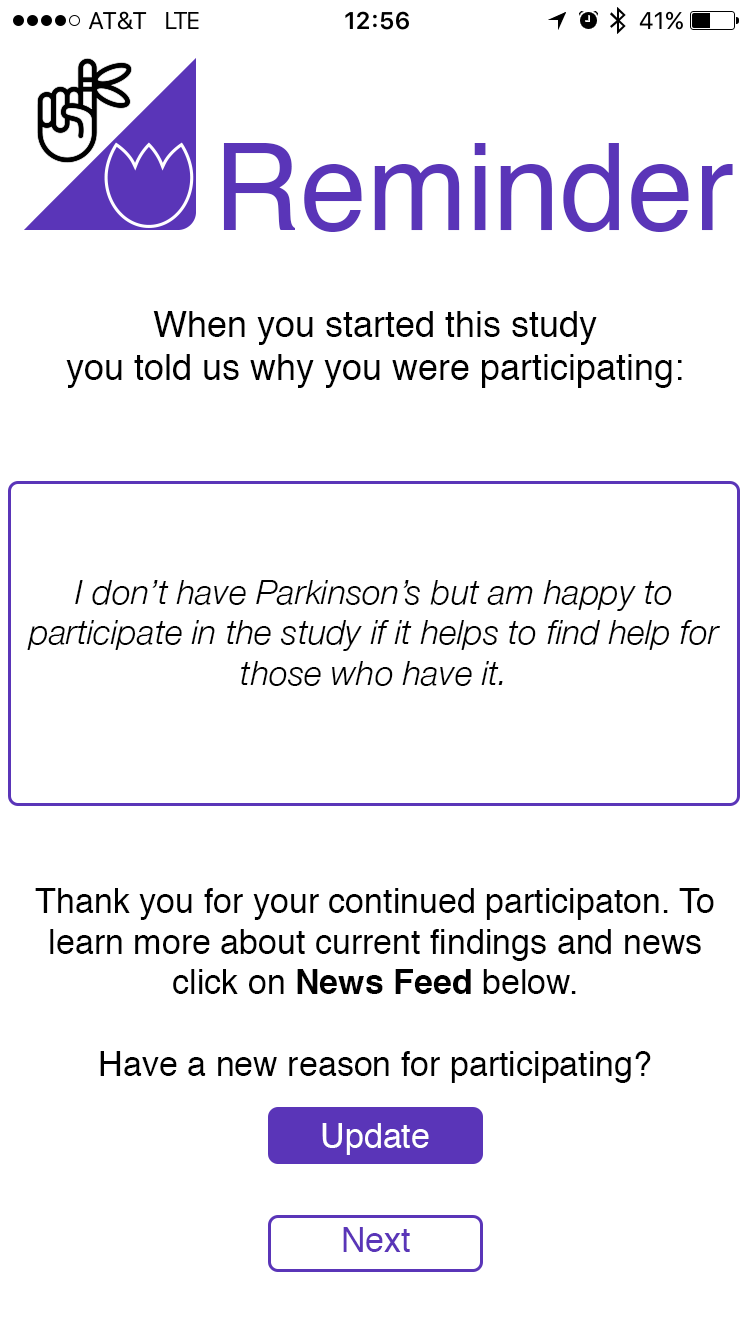
<style>
.page{position:relative;width:750px;height:1334px;background:#ffffff}
.page>*{position:absolute;margin:0}
.t1{font:120px "Helvetica";color:#5a35b8}
.t2{font:36px "Helvetica";color:#000000}
.t3{font:34px "HelveticaNeue-LightItalic";color:#000000}
.t4{font:34px "Helvetica";color:#000000}
.t5{font:34px "Helvetica-Bold";color:#000000}
.t6{font:34px "Helvetica";color:#fefefe}
.t7{font:34px "Helvetica";color:#5a35b8}
</style>
<div class="page">
<p class="t1" style="left:223px;top:143px;width:510px;height:89px">Reminder</p>
<p class="t2" style="left:66px;top:311px;width:616px;height:77px;text-align:center">When you started this study <br>you told us why you were participating:</p>
<p class="t3" style="left:27px;top:580px;width:693px;height:106px;text-align:center">I don’t have Parkinson’s but am happy to participate in the study if it helps to find help for those who have it.</p>
<p class="t4" style="left:35px;top:888px;width:679px;height:195px;text-align:center">Thank you for your continued participaton. To learn more about current findings and news click on <span class="t5">News Feed</span> below.<br><br>Have a new reason for participating?</p>
<p class="t6" style="left:322px;top:1123px;width:107px;height:32px">Update</p>
<p class="t7" style="left:343px;top:1227px;width:67px;height:25px">Next</p>
</div>
